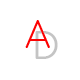
<style>
.page{position:relative;width:80px;height:80px;background:#ffffff}
.page>*{position:absolute;margin:0}
.t1{font:36px "Comfortaa-Light";color:#fc0202}
.t2{font:36px "Comfortaa-Regular";color:#c4c4c4}
</style>
<div class="page">
<p class="t1" style="left:25px;top:20px;width:25px;height:28px">A</p>
<p class="t2" style="left:35px;top:31px;width:23px;height:28px">D</p>
</div>
